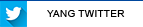
<style>
.page{position:relative;width:143px;height:27px;background:#ffffff}
.page>*{position:absolute;margin:0}
.t1{font:10.4px "ArialMT";color:#000000}
</style>
<div class="page">
<p class="t1" style="left:47px;top:10px;width:78px;height:7px">YANG TWITTER</p>
</div>
